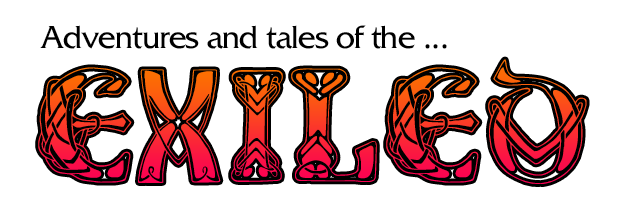
<style>
.page{position:relative;width:633px;height:214px;background:#ffffff}
.page>*{position:absolute;margin:0}
.t1{font:33.3px "FritzQuadrataCyrillic";letter-spacing:-0.025em;color:#000000}
.t2{font:125px "CelticaBlack";letter-spacing:-0.025em}
.t3{font:120px "CelticaBlack";letter-spacing:-0.025em}
</style>
<div class="page">
<p class="t1" style="left:40px;top:25px;width:407px;height:24px">Adventures and tales of the ...</p>
<p class="t2" style="left:488px;top:59px;width:99px;height:125px">D</p>
<p class="t2" style="left:38px;top:67px;width:94px;height:116px">E</p>
<p class="t3" style="left:138px;top:69px;width:83px;height:114px;rotate:2deg">X</p>
<p class="t2" style="left:231px;top:70px;width:52px;height:112px">I</p>
<p class="t2" style="left:291px;top:68px;width:86px;height:114px">L</p>
<p class="t2" style="left:386px;top:67px;width:94px;height:116px">E</p>
</div>
